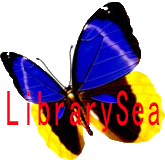
<style>
.page{position:relative;width:165px;height:160px;background:#ffffff}
.page>*{position:absolute;margin:0}
.t1{font:51.1px "SimHei";letter-spacing:-0.025em;color:#ff0012;scale:0.53 1}
</style>
<div class="page">
<p class="t1" style="left:7px;top:90px;width:153px;height:43px">LibrarySea</p>
</div>
